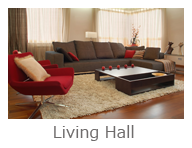
<style>
.page{position:relative;width:192px;height:148px;background:#ffffff}
.page>*{position:absolute;margin:0}
.t1{font:15.9px "Meiryo";letter-spacing:0.01em;color:#6f6c6c}
</style>
<div class="page">
<p class="t1" style="left:54px;top:125px;width:80px;height:16px">Living Hall</p>
</div>
